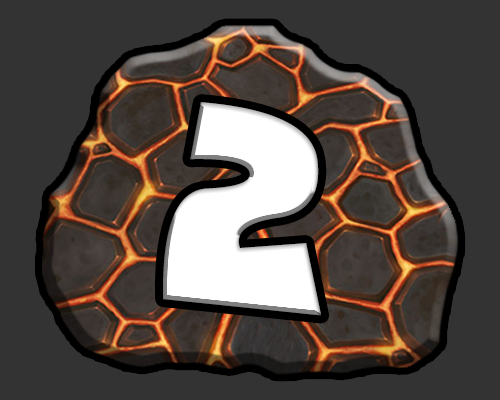
<style>
.page{position:relative;width:500px;height:400px;background:#333333}
.page>*{position:absolute;margin:0}
.t1{font:257.3px "Funhouse";color:#ffffff}
</style>
<div class="page">
<p class="t1" style="left:163px;top:102px;width:159px;height:214px">2</p>
</div>
